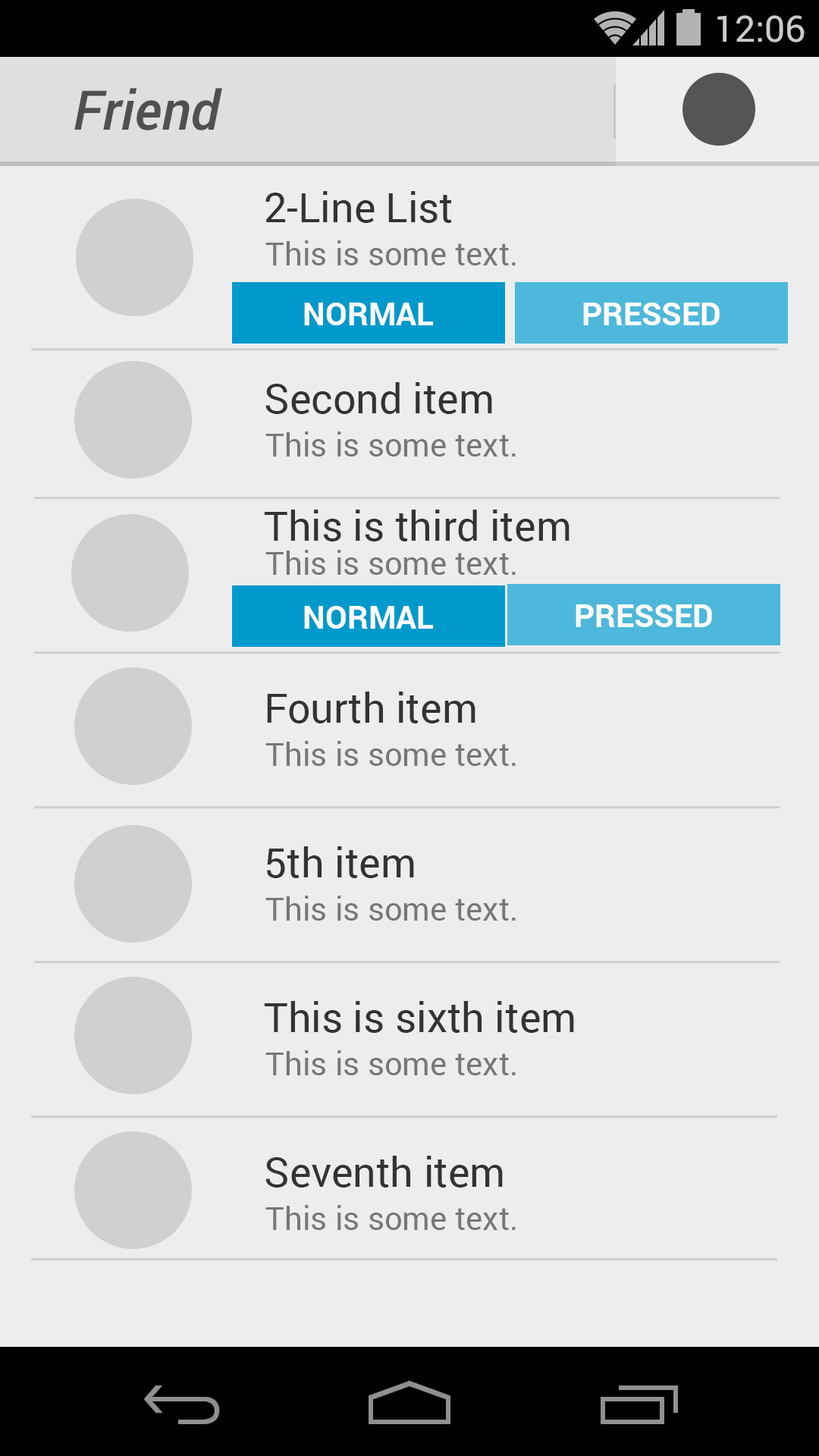
<style>
.page{position:relative;width:819px;height:1456px;background:#ededed}
.page>*{position:absolute;margin:0}
.t1{font:36.4px "Roboto-Regular";color:#cbcbcb}
.t2{font:54.6px "Roboto-MediumItalic";color:#505050}
.t3{font:40.9px "Roboto-Regular";color:#333333}
.t4{font:31.8px "Roboto-Regular";color:#777777}
.t5{font:31.8px "Roboto-Bold";color:#ffffff}
</style>
<div class="page">
<p class="t1" style="left:717px;top:15px;width:88px;height:27px">12:06</p>
<p class="t2" style="left:74px;top:88px;width:148px;height:42px">Friend</p>
<p class="t3" style="left:265px;top:191px;width:187px;height:32px">2-Line List</p>
<p class="t4" style="left:265px;top:240px;width:251px;height:25px">This is some text.</p>
<p class="t5" style="left:304px;top:303px;width:130px;height:22px">NORMAL</p>
<p class="t5" style="left:583px;top:303px;width:137px;height:22px">PRESSED</p>
<p class="t3" style="left:265px;top:382px;width:227px;height:32px">Second item</p>
<p class="t4" style="left:265px;top:431px;width:251px;height:26px">This is some text.</p>
<p class="t3" style="left:264px;top:510px;width:306px;height:31px">This is third item</p>
<p class="t4" style="left:265px;top:550px;width:251px;height:25px">This is some text.</p>
<p class="t5" style="left:304px;top:606px;width:130px;height:23px">NORMAL</p>
<p class="t5" style="left:576px;top:604px;width:136px;height:23px">PRESSED</p>
<p class="t3" style="left:267px;top:692px;width:208px;height:31px">Fourth item</p>
<p class="t4" style="left:265px;top:741px;width:251px;height:25px">This is some text.</p>
<p class="t3" style="left:267px;top:846px;width:147px;height:32px">5th item</p>
<p class="t4" style="left:265px;top:896px;width:251px;height:25px">This is some text.</p>
<p class="t3" style="left:264px;top:1001px;width:310px;height:32px">This is sixth item</p>
<p class="t4" style="left:265px;top:1050px;width:251px;height:25px">This is some text.</p>
<p class="t3" style="left:265px;top:1156px;width:238px;height:32px">Seventh item</p>
<p class="t4" style="left:265px;top:1205px;width:251px;height:25px">This is some text.</p>
</div>
